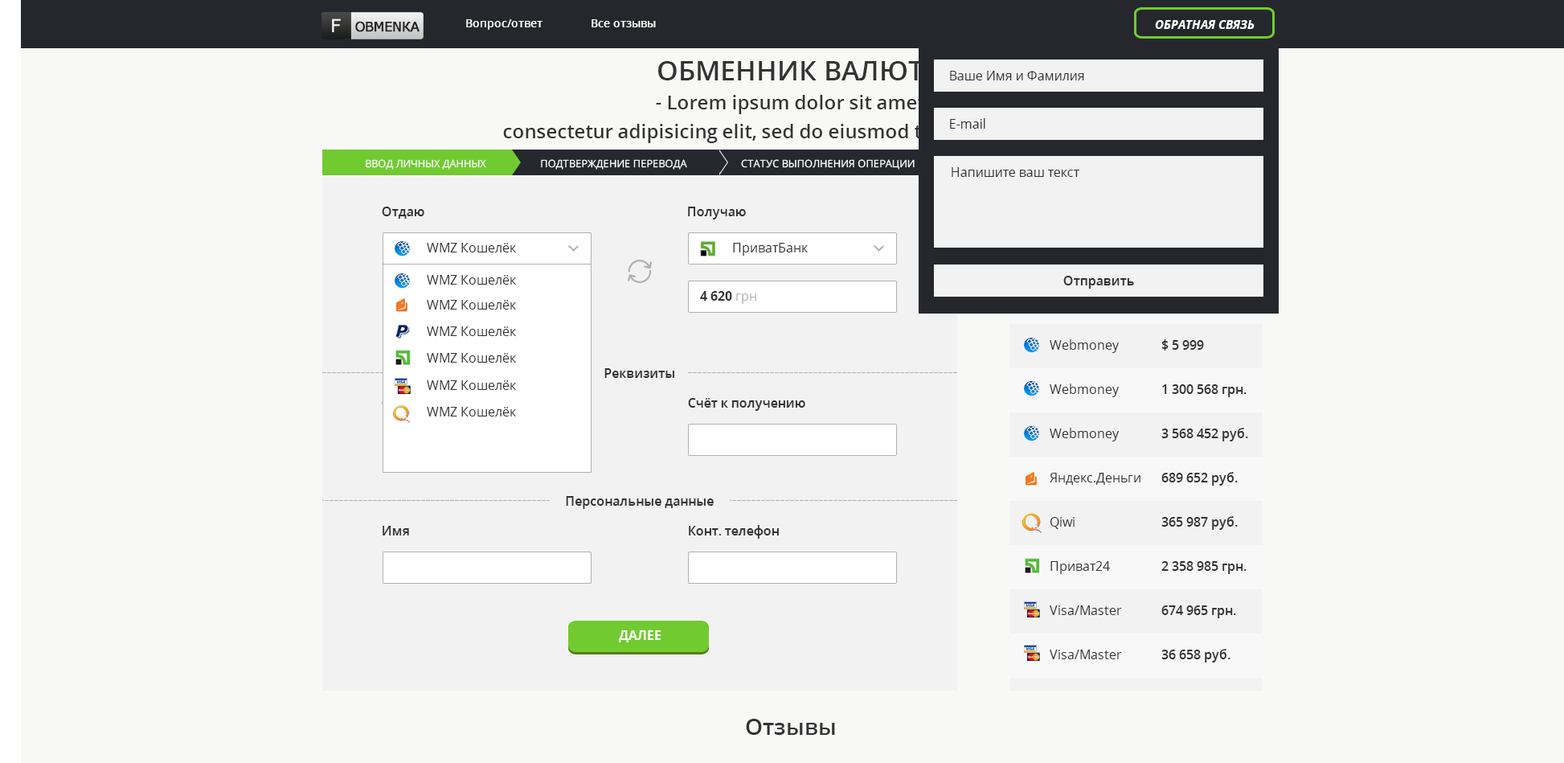
<style>
.page{position:relative;width:1564px;height:763px;background:#f8f9f7}
.page>*{position:absolute;margin:0}
.t1{font:18px "MSReferenceSansSerif";color:#fcf8f8;text-transform:uppercase}
.t2{font:13.3px "MSReferenceSansSerif";letter-spacing:-0.075em;color:#232222;text-transform:uppercase;font-weight:bold}
.t3{font:11.2px "OpenSans-Semibold";color:#ffffff}
.t4{font:12.1px "OpenSans-BoldItalic";color:#ffffff;text-transform:uppercase}
.t5{font:19.3px/28.9px "OpenSans-Semibold";color:#333333}
.t6{font:27.3px/28.9px "OpenSans-Semibold";color:#333333;text-transform:uppercase}
.t7{font:12.9px "OpenSans";color:#333333}
.t8{font:10.3px "OpenSans";color:#ffffff;text-transform:uppercase}
.t9{font:12.9px "OpenSans-Semibold";color:#333333}
.t10{font:12.9px/44.2px "OpenSans";color:#333333}
.t11{font:12.9px/44.2px "OpenSans-Semibold";color:#333333}
.t12{font:12.9px "OpenSans-Bold";color:#333333}
.t13{font:12.9px "OpenSans";color:#b0b0b0}
.t14{font:12.9px "OpenSans-Bold";color:#ffffff;text-transform:uppercase}
.t15{font:22.5px "OpenSans-Semibold";color:#333333}
</style>
<div class="page">
<p class="t1" style="left:332px;top:18px;width:9px;height:14px">f</p>
<p class="t2" style="left:355px;top:21px;width:64px;height:11px">Obmenка</p>
<p class="t3" style="left:466px;top:19px;width:190px;height:11px">Вопрос/ответ               Все отзывы</p>
<p class="t4" style="left:1155px;top:20px;width:99px;height:9px">Обратная связь</p>
<p class="t5" style="left:503px;top:61px;width:579px;height:82px;text-align:center"><span class="t6">Обменник валют <br></span>- Lorem ipsum dolor sit amet,<br>consectetur adipisicing elit, sed do eiusmod tempor incididunt</p>
<p class="t7" style="left:950px;top:71px;width:134px;height:9px">Ваше Имя и Фамилия</p>
<p class="t7" style="left:950px;top:118px;width:35px;height:11px">E-mail</p>
<p class="t8" style="left:366px;top:159px;width:548px;height:11px">ввод личных данных                    подтверждение перевода                    статус выполнения операции</p>
<p class="t7" style="left:951px;top:167px;width:128px;height:10px">Напишите ваш текст</p>
<p class="t9" style="left:382px;top:207px;width:42px;height:12px">Отдаю</p>
<p class="t9" style="left:688px;top:207px;width:58px;height:12px">Получаю</p>
<p class="t7" style="left:427px;top:243px;width:89px;height:9px">WMZ Кошелёк</p>
<p class="t7" style="left:733px;top:243px;width:75px;height:13px">ПриватБанк</p>
<p class="t10" style="left:1049px;top:251px;width:91px;height:408px">Webmoney<br>Webmoney<br>Webmoney<br>Webmoney<br>Webmoney<br>Яндекс.Деньги<br>Qiwi<br>Приват24<br>Visa/Master<br>Visa/Master</p>
<p class="t11" style="left:1161px;top:251px;width:87px;height:411px">$ 5 999<br>$ 5 999<br>$ 5 999<br>1 300 568 грн.<br>3 568 452 руб.<br>689 652 руб.<br>365 987 руб.<br>2 358 985 грн.<br>674 965 грн.<br>36 658 руб.</p>
<p class="t7" style="left:427px;top:275px;width:89px;height:9px">WMZ Кошелёк</p>
<p class="t9" style="left:1063px;top:276px;width:71px;height:12px">Отправить</p>
<p class="t12" style="left:700px;top:291px;width:56px;height:13px">4 620 <span class="t13">грн</span></p>
<p class="t7" style="left:427px;top:300px;width:89px;height:9px">WMZ Кошелёк</p>
<p class="t7" style="left:427px;top:326px;width:89px;height:10px">WMZ Кошелёк</p>
<p class="t7" style="left:427px;top:353px;width:89px;height:9px">WMZ Кошелёк</p>
<p class="t9" style="left:604px;top:368px;width:70px;height:10px">Реквизиты</p>
<p class="t7" style="left:427px;top:380px;width:89px;height:10px">WMZ Кошелёк</p>
<p class="t9" style="left:688px;top:398px;width:117px;height:13px">Счёт к получению</p>
<p class="t7" style="left:427px;top:407px;width:89px;height:9px">WMZ Кошелёк</p>
<p class="t9" style="left:566px;top:496px;width:148px;height:13px">Персональные данные</p>
<p class="t9" style="left:382px;top:526px;width:27px;height:9px">Имя</p>
<p class="t9" style="left:689px;top:525px;width:90px;height:13px">Конт. телефон</p>
<p class="t14" style="left:619px;top:630px;width:42px;height:12px">Далее</p>
<p class="t15" style="left:746px;top:718px;width:89px;height:16px">Отзывы</p>
</div>
